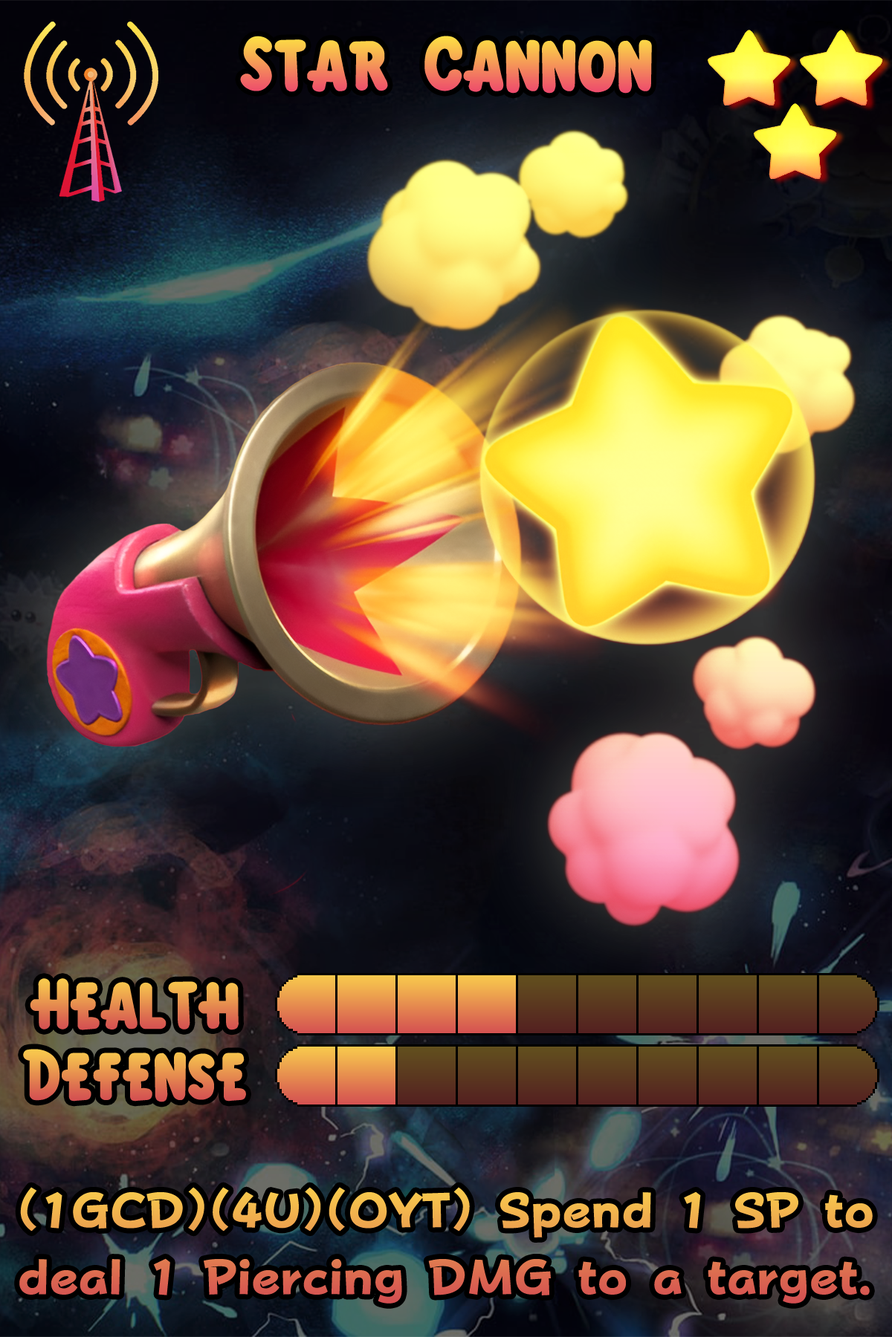
<style>
.page{position:relative;width:892px;height:1337px}
.page>*{position:absolute;margin:0}
.t1{font:118.9px "KirbyClassic"}
.t2{font:109.2px "KirbyClassic"}
.t3{font:110.7px "KirbyClassic"}
.t4{font:84px "FOTPopHappinessStrp-ExtraBold"}
</style>
<div class="page">
<p class="t1" style="left:240px;top:36px;width:412px;height:58px">Star Cannon</p>
<p class="t2" style="left:30px;top:979px;width:209px;height:52px">Health</p>
<p class="t3" style="left:23px;top:1049px;width:223px;height:54px">Defense</p>
<p class="t4" style="left:19px;top:1187px;width:853px;height:117px">(1GCD)(4U)(OYT) Spend 1 SP to deal 1 Piercing DMG to a target.</p>
</div>
